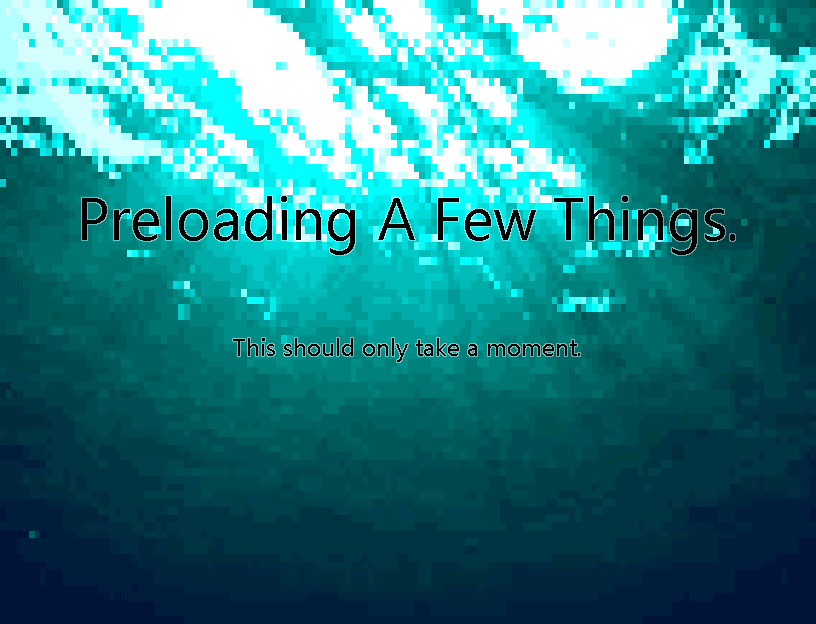
<style>
.page{position:relative;width:816px;height:624px}
.page>*{position:absolute;margin:0}
.t1{font:24px "Ebrima";color:#000000}
.t2{font:60px "Ebrima";color:#000000}
</style>
<div class="page">
<p class="t1" style="left:82px;top:196px;width:653px;height:166px;text-align:center"><span class="t2">Preloading A Few Things.<br></span><br><br><br>This should only take a moment.</p>
</div>
